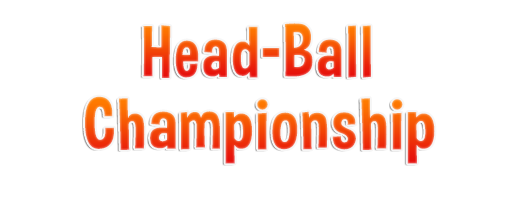
<style>
.page{position:relative;width:512px;height:200px;background:#ffffff}
.page>*{position:absolute;margin:0}
.t1{font:73.5px "DimboRegular";letter-spacing:0.04em;scale:0.92 1}
.t2{font:73px "DimboRegular";letter-spacing:0.04em}
</style>
<div class="page">
<p class="t1" style="left:143px;top:23px;width:228px;height:55px">Head-Ball</p>
<p class="t2" style="left:85px;top:96px;width:350px;height:68px">Championship</p>
</div>
